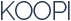
<style>
.page{position:relative;width:71px;height:21px;background:#ffffff}
.page>*{position:absolute;margin:0}
.t1{font:26px "Raleway-Light";letter-spacing:-0.048em;color:#2d3a4e;font-variant:small-caps}
</style>
<div class="page">
<p class="t1" style="left:1px;top:1px;width:69px;height:19px">KOOPI</p>
</div>
